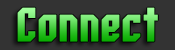
<style>
.page{position:relative;width:175px;height:50px;background:#333333}
.page>*{position:absolute;margin:0}
.t1{font:47.9px "Whitestone-Bold"}
</style>
<div class="page">
<p class="t1" style="left:17px;top:7px;width:141px;height:35px">Connect</p>
</div>
